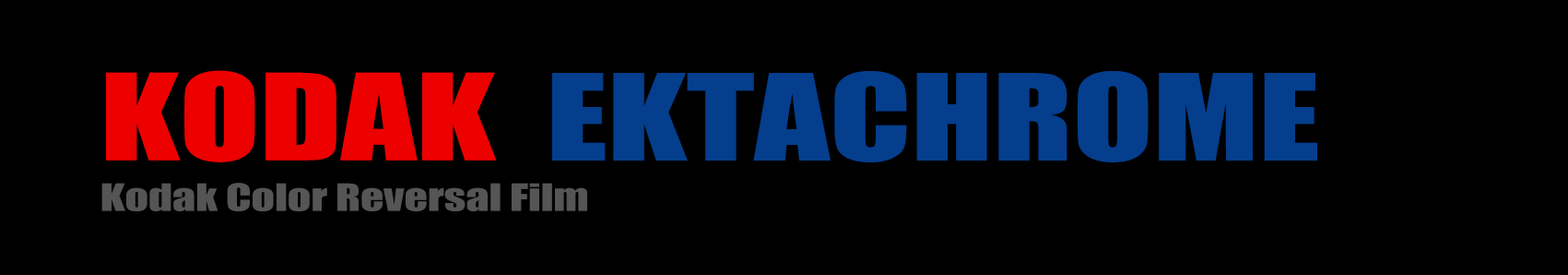
<style>
.page{position:relative;width:1568px;height:275px;background:#000000}
.page>*{position:absolute;margin:0}
.t1{font:110.6px "Impact";color:#ed0000;scale:1.33 1}
.t2{font:110.6px "Impact";color:#043e8c;scale:1.33 1}
.t3{font:34.6px "Impact";color:#555555;scale:1.33 1}
</style>
<div class="page">
<p class="t1" style="left:106px;top:70px;width:391px;height:92px">KODAK</p>
<p class="t2" style="left:552px;top:71px;width:765px;height:91px">EKTACHROME</p>
<p class="t3" style="left:101px;top:183px;width:486px;height:28px">Kodak Color Reversal Film</p>
</div>
